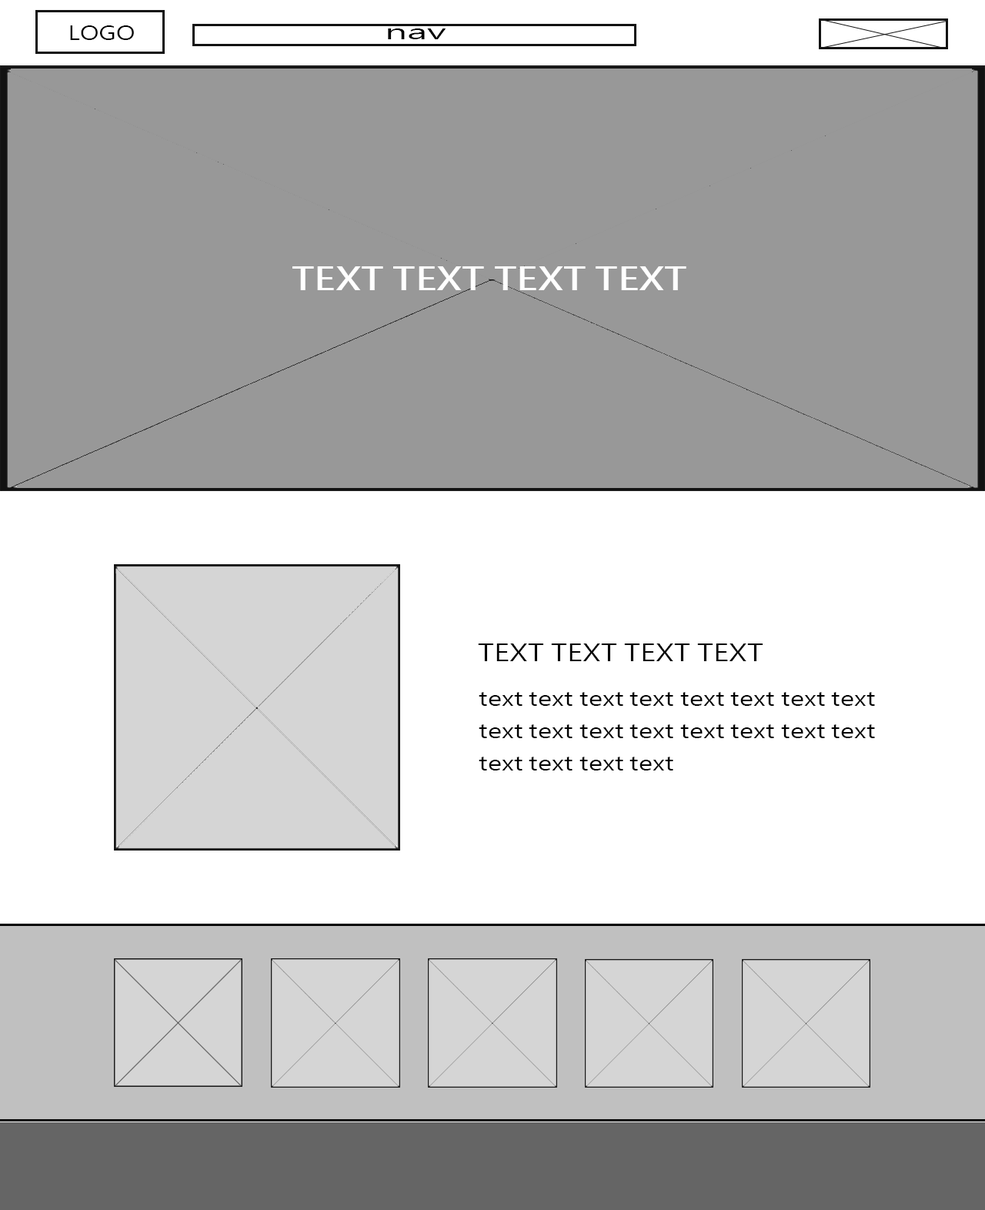
<style>
.page{position:relative;width:985px;height:1210px;background:#989898}
.page>*{position:absolute;margin:0}
.t1{font:19px "MicrosoftJhengHeiRegular";color:#000000;scale:1.23 1}
.t2{font:19px "MicrosoftJhengHeiRegular";color:#000000;scale:1.95 1}
.t3{font:30.8px "MicrosoftJhengHeiBold";color:#ffffff;scale:1.24 1}
.t4{font:23.1px "MicrosoftJhengHeiRegular";color:#000000;scale:1.24 1}
.t5{font:20px/32.2px "MicrosoftJhengHeiRegular";color:#000000;scale:1.24 1}
</style>
<div class="page">
<p class="t1" style="left:70px;top:25px;width:64px;height:15px">LOGO</p>
<p class="t2" style="left:388px;top:28px;width:58px;height:11px">nav</p>
<p class="t3" style="left:293px;top:266px;width:394px;height:24px">TEXT TEXT TEXT TEXT</p>
<p class="t4" style="left:478px;top:644px;width:285px;height:17px">TEXT TEXT TEXT TEXT</p>
<p class="t5" style="left:479px;top:692px;width:396px;height:79px">text text text text text text text text<br>text text text text text text text text<br>text text text text</p>
</div>
